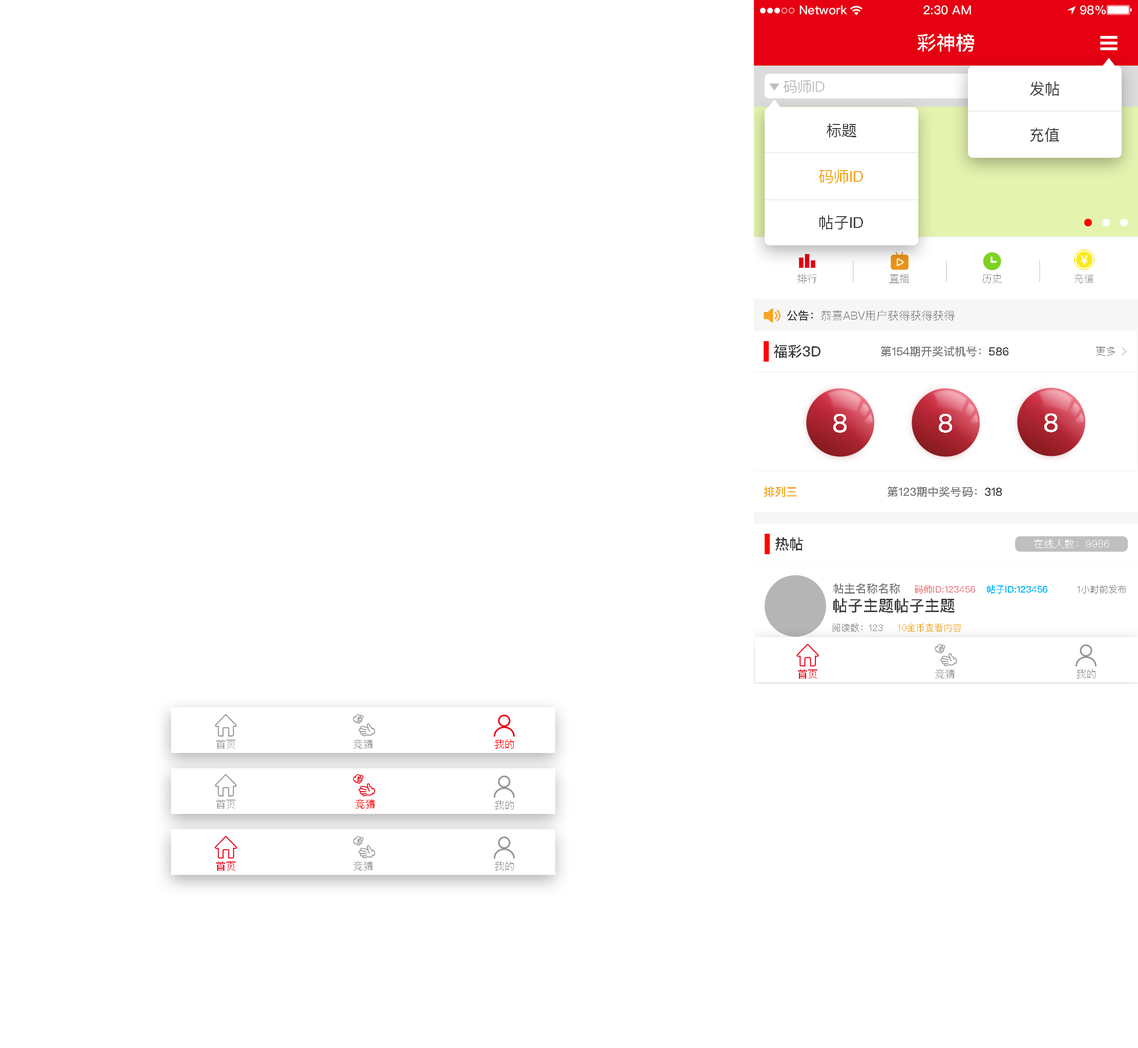
<style>
.page{position:relative;width:1138px;height:1048px;background:#ffffff}
.page>*{position:absolute;margin:0}
.t1{font:19.5px "PingFangSC-Medium";color:#ffffff;text-transform:uppercase}
.t2{font:14.3px "PingFangSC-Regular";color:#bfbfbf;text-transform:uppercase}
.t3{font:15.4px "PingFangSC-Regular";color:#434343;text-transform:uppercase}
.t4{font:15.4px "PingFangSC-Regular";color:#f5a623;text-transform:uppercase}
.t5{font:10.2px "PingFangSC-Regular";color:#9b9b9b;text-transform:uppercase}
.t6{font:11.3px "PingFangSC-Regular";color:#959595;text-transform:uppercase}
.t7{font:11.3px "PingFangSC-Medium";color:#434343;text-transform:uppercase}
.t8{font:14.3px "PingFangSC-Medium";color:#434343;text-transform:uppercase}
.t9{font:11.3px "PingFangSC-Medium";color:#7d7d7d;text-transform:uppercase}
.t10{font:10.2px "PingFangSC-Regular";color:#898989;text-transform:uppercase}
.t11{font:25.6px "PingFangSC-Medium";color:#ffffff;text-transform:uppercase}
.t12{font:11.3px "PingFangSC-Medium";color:#f6a623;text-transform:uppercase}
.t13{font:10.2px "PingFangSC-Regular";color:#ffffff;text-transform:uppercase}
.t14{font:9.2px "PingFangSC-Medium";color:#f08d91;text-transform:uppercase}
.t15{font:9.2px "PingFangSC-Medium";color:#01b9fd;text-transform:uppercase}
.t16{font:9.2px "PingFangSC-Regular";color:#7d7d7d;text-transform:uppercase}
.t17{font:15.4px "PingFangSC-Medium";color:#434343;text-transform:uppercase}
.t18{font:9.2px "PingFangSC-Regular";color:#f6a623;text-transform:uppercase}
.t19{font:10.2px "PingFangSC-Regular";color:#e60012;text-transform:uppercase}
.t20{font:10.2px "PingFangSC-Regular";color:#959595;text-transform:uppercase}
.t21{font:10.2px "PingFangSC-Regular";color:#a0a0a0;text-transform:uppercase}
.t22{font:10.2px "PingFangSC-Regular";color:#ff0000;text-transform:uppercase}
</style>
<div class="page">
<p class="t1" style="left:917px;top:34px;width:57px;height:18px">彩神榜</p>
<p class="t2" style="left:784px;top:80px;width:41px;height:13px">码师ID</p>
<p class="t3" style="left:1030px;top:81px;width:29px;height:15px">发帖</p>
<p class="t3" style="left:827px;top:123px;width:29px;height:14px">标题</p>
<p class="t3" style="left:1030px;top:128px;width:29px;height:14px">充值</p>
<p class="t4" style="left:819px;top:170px;width:44px;height:13px">码师ID</p>
<p class="t3" style="left:819px;top:215px;width:44px;height:14px">帖子ID</p>
<p class="t5" style="left:797px;top:273px;width:20px;height:10px">排行</p>
<p class="t5" style="left:890px;top:274px;width:19px;height:9px">直播</p>
<p class="t5" style="left:982px;top:273px;width:20px;height:10px">历史</p>
<p class="t5" style="left:1074px;top:273px;width:19px;height:10px">充值</p>
<p class="t6" style="left:787px;top:310px;width:168px;height:11px"><span class="t7">公告：</span>恭喜abv用户获得获得获得</p>
<p class="t8" style="left:774px;top:345px;width:46px;height:13px">福彩3d</p>
<p class="t9" style="left:881px;top:346px;width:127px;height:10px">第154期开奖试机号：<span class="t7">586</span></p>
<p class="t10" style="left:1096px;top:347px;width:19px;height:9px">更多</p>
<p class="t11" style="left:833px;top:414px;width:14px;height:19px">8</p>
<p class="t11" style="left:939px;top:414px;width:13px;height:19px">8</p>
<p class="t11" style="left:1044px;top:413px;width:14px;height:19px">8</p>
<p class="t12" style="left:764px;top:487px;width:33px;height:10px">排列三</p>
<p class="t9" style="left:888px;top:487px;width:114px;height:10px">第123期中奖号码：<span class="t7">318</span></p>
<p class="t8" style="left:775px;top:537px;width:28px;height:14px">热帖</p>
<p class="t13" style="left:1034px;top:539px;width:75px;height:10px">在线人数：9986</p>
<p class="t9" style="left:834px;top:583px;width:66px;height:11px">帖主名称名称</p>
<p class="t14" style="left:915px;top:585px;width:60px;height:9px">码师id:123456</p>
<p class="t15" style="left:987px;top:585px;width:60px;height:9px">帖子id:123456</p>
<p class="t16" style="left:1078px;top:585px;width:48px;height:9px">1小时前发布</p>
<p class="t17" style="left:833px;top:598px;width:122px;height:15px">帖子主题帖子主题</p>
<p class="t16" style="left:833px;top:623px;width:50px;height:9px">阅读数：123</p>
<p class="t18" style="left:898px;top:623px;width:63px;height:9px">10金币查看内容</p>
<p class="t19" style="left:798px;top:669px;width:19px;height:10px">首页</p>
<p class="t20" style="left:935px;top:669px;width:20px;height:10px">竞猜</p>
<p class="t20" style="left:1077px;top:669px;width:18px;height:10px">我的</p>
<p class="t21" style="left:216px;top:740px;width:20px;height:9px">首页</p>
<p class="t20" style="left:353px;top:739px;width:20px;height:10px">竞猜</p>
<p class="t22" style="left:495px;top:739px;width:19px;height:10px">我的</p>
<p class="t21" style="left:216px;top:799px;width:20px;height:10px">首页</p>
<p class="t22" style="left:355px;top:799px;width:20px;height:10px">竞猜</p>
<p class="t20" style="left:495px;top:800px;width:19px;height:10px">我的</p>
<p class="t19" style="left:216px;top:861px;width:20px;height:10px">首页</p>
<p class="t20" style="left:353px;top:861px;width:20px;height:10px">竞猜</p>
<p class="t20" style="left:495px;top:861px;width:19px;height:10px">我的</p>
</div>
